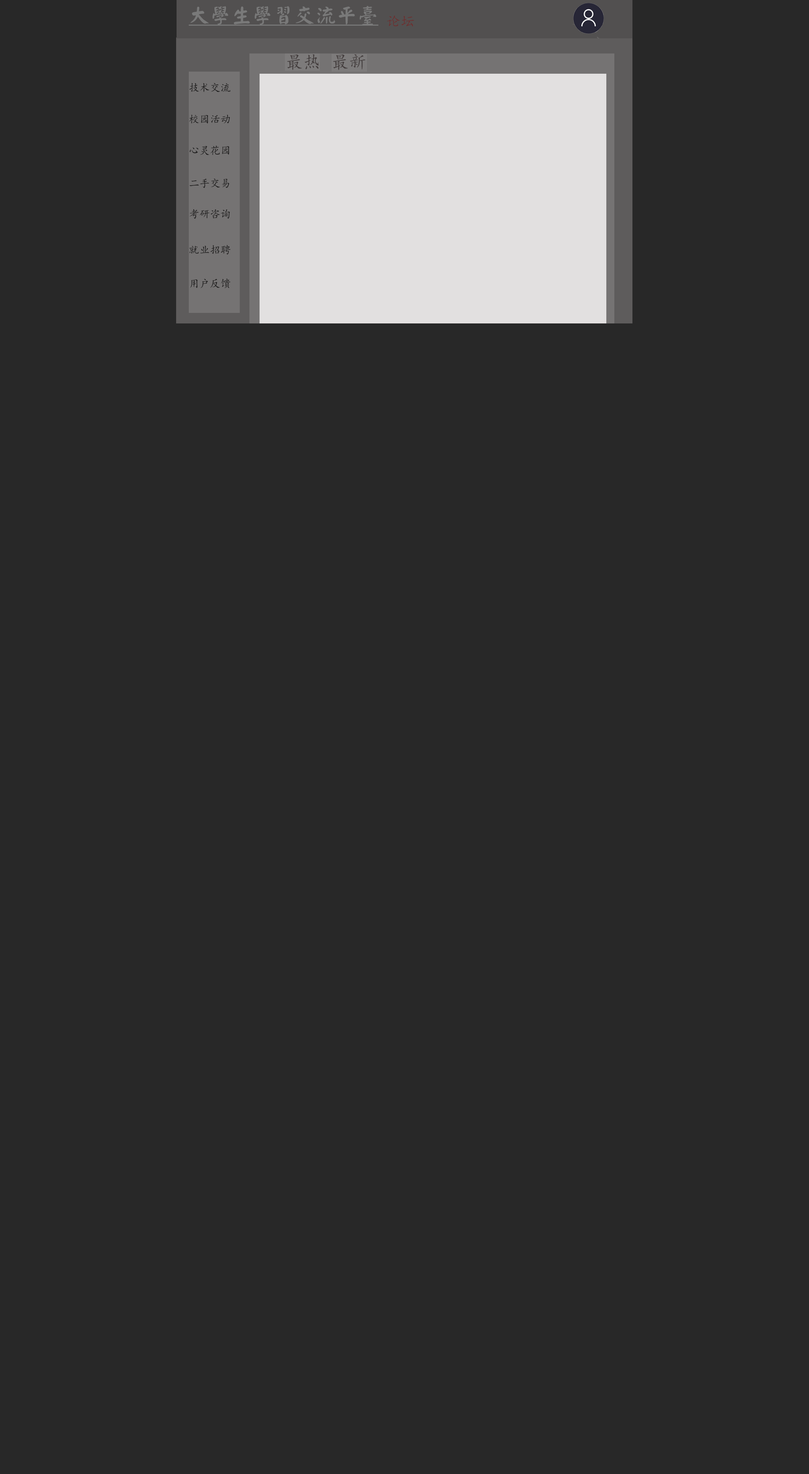
<style>
.page{position:relative;width:809px;height:1474px;background:#282828}
.page>*{position:absolute;margin:0}
.t1{font:21.1px "HanWangYanKai";color:#797979;text-decoration:underline}
.t2{font:14px "KaiTi";color:#6d2f2f}
.t3{font:17.6px "KaiTi";color:#423c3c}
.t4{font:10.5px "KaiTi";color:#171616}
</style>
<div class="page">
<p class="t1" style="left:189px;top:6px;width:189px;height:20px">大學生學習交流平臺</p>
<p class="t2" style="left:387px;top:16px;width:27px;height:11px">论坛</p>
<p class="t3" style="left:287px;top:54px;width:32px;height:16px">最热</p>
<p class="t3" style="left:333px;top:54px;width:32px;height:16px">最新<br><br><br>uixinzuix</p>
<p class="t4" style="left:189px;top:83px;width:41px;height:9px">技术交流</p>
<p class="t4" style="left:189px;top:115px;width:41px;height:9px">校园活动</p>
<p class="t4" style="left:190px;top:145px;width:39px;height:10px">心灵花园</p>
<p class="t4" style="left:190px;top:179px;width:39px;height:9px">二手交易</p>
<p class="t4" style="left:190px;top:209px;width:40px;height:10px">考研咨询</p>
<p class="t4" style="left:189px;top:245px;width:41px;height:10px">就业招聘</p>
<p class="t4" style="left:190px;top:278px;width:40px;height:10px">用户反馈</p>
</div>
